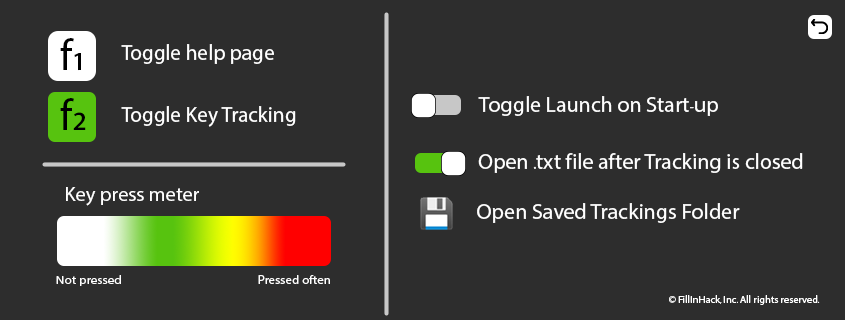
<style>
.page{position:relative;width:845px;height:320px;background:#2d2d2d}
.page>*{position:absolute;margin:0}
.t1{font:43.8px "MyriadPro-Regular";color:#000000;scale:0.97 1}
.t2{font:21.9px "MyriadPro-Regular";color:#ffffff;scale:0.97 1}
.t3{font:21.9px "MyriadPro-Regular";color:#ffffff}
.t4{font:20.4px "MyriadPro-Regular";color:#ffffff}
.t5{font:11.5px "MyriadPro-Regular";color:#ffffff;scale:1.15 1}
.t6{font:12.2px "MyriadPro-Regular";color:#ffffff;scale:1.06 1}
.t7{font:10.4px "MyriadPro-Regular";color:#ffffff}
</style>
<div class="page">
<p class="t1" style="left:60px;top:38px;width:21px;height:33px">f1</p>
<p class="t2" style="left:121px;top:44px;width:153px;height:20px">Toggle help page</p>
<p class="t1" style="left:60px;top:98px;width:26px;height:32px">f2</p>
<p class="t3" style="left:478px;top:96px;width:240px;height:20px">Toggle Launch on Start-up</p>
<p class="t2" style="left:121px;top:106px;width:175px;height:21px">Toggle Key Tracking</p>
<p class="t3" style="left:478px;top:153px;width:325px;height:20px">Open .txt file after Tracking is closed</p>
<p class="t4" style="left:66px;top:187px;width:133px;height:19px">Key press meter</p>
<p class="t3" style="left:477px;top:203px;width:263px;height:20px">Open Saved Trackings Folder</p>
<p class="t5" style="left:56px;top:275px;width:65px;height:11px">Not pressed</p>
<p class="t6" style="left:258px;top:275px;width:72px;height:9px">Pressed often</p>
<p class="t7" style="left:669px;top:295px;width:151px;height:10px">© FillInHack, Inc. All rights reserved.</p>
</div>
